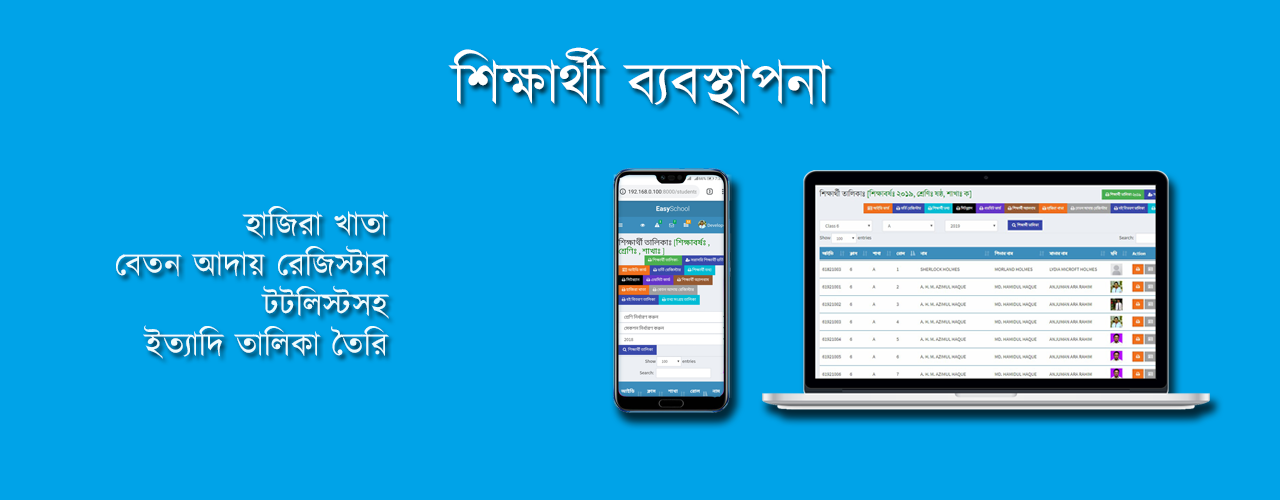
<style>
.page{position:relative;width:1280px;height:500px;background:#00a3e8}
.page>*{position:absolute;margin:0}
.t1{font:60px "Kalpurush";color:#ffffff}
.t2{font:33.3px "Kalpurush";color:#ffffff}
</style>
<div class="page">
<p class="t1" style="left:448px;top:47px;width:384px;height:68px">শিক্ষার্থী ব্যবস্থাপনা</p>
<p class="t2" style="left:116px;top:206px;width:273px;height:153px">হাজিরা খাতা<br>বেতন আদায় রেজিস্টার<br>টটলিস্টসহ<br>ইত্যাদি তালিকা তৈরি</p>
</div>
